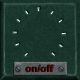
<style>
.page{position:relative;width:80px;height:80px;background:#183129}
.page>*{position:absolute;margin:0}
.t1{font:10px "Arial-BoldMT";color:#420303}
</style>
<div class="page">
<p class="t1" style="left:26px;top:64px;width:28px;height:8px">on/off</p>
</div>
